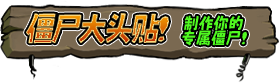
<style>
.page{position:relative;width:279px;height:83px;background:#ffffff}
.page>*{position:absolute;margin:0}
.t1{font:35.5px "NishikitekiBold-Regular";letter-spacing:-0.12em;scale:0.94 1}
.t2{font:17.3px/15.8px "NishikitekiBold-Regular";color:#41ff17;scale:0.96 1}
</style>
<div class="page">
<p class="t1" style="left:26px;top:13px;width:143px;height:31px">僵尸大头贴!</p>
<p class="t2" style="left:182px;top:15px;width:65px;height:31px;text-align:justify">制作你的<br>专属僵尸!</p>
</div>
